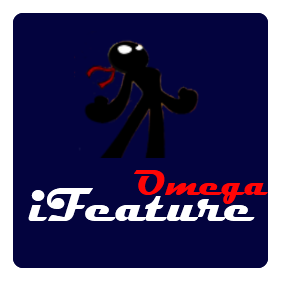
<style>
.page{position:relative;width:283px;height:283px;background:#03033e}
.page>*{position:absolute;margin:0}
.t1{font:36px "Magneto-Bold";color:#ff0505}
.t2{font:48px "Magneto-Bold";color:#ffffff}
</style>
<div class="page">
<p class="t1" style="left:134px;top:170px;width:134px;height:34px">Omega</p>
<p class="t2" style="left:28px;top:188px;width:227px;height:33px">iFeature</p>
</div>
